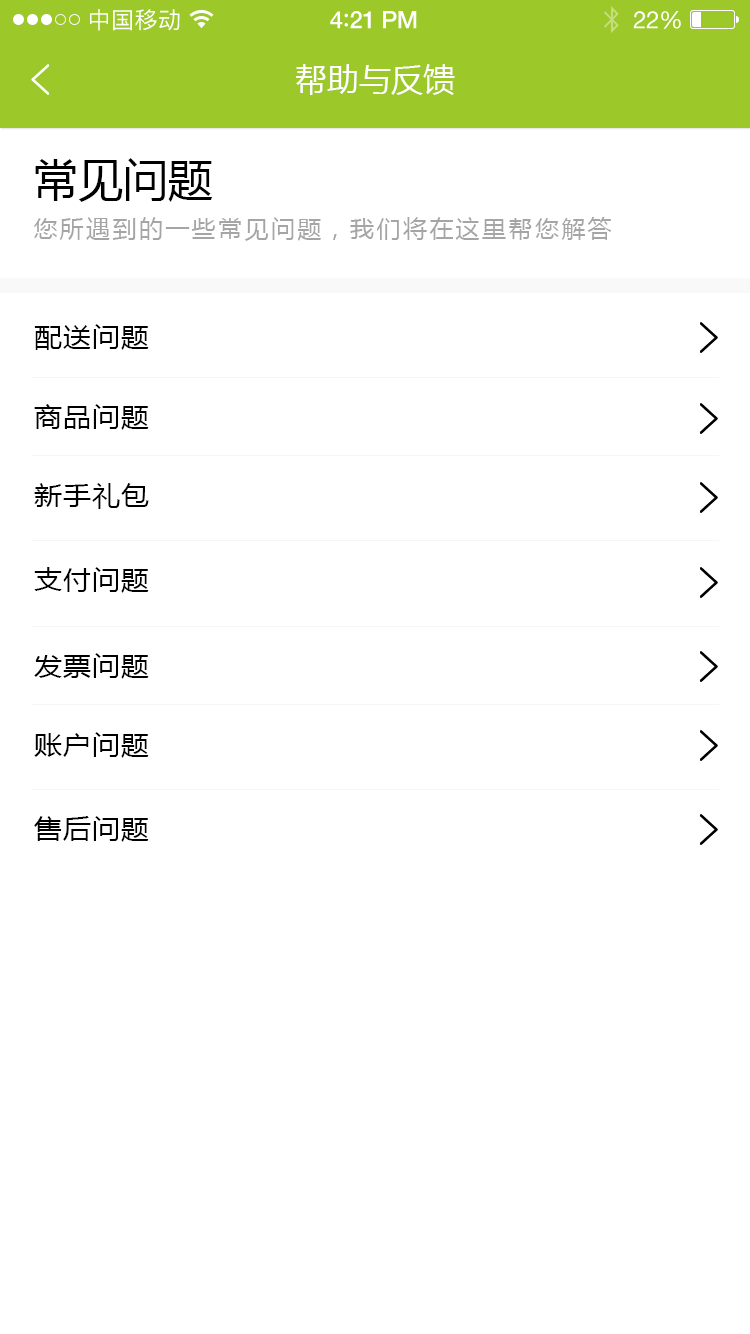
<style>
.page{position:relative;width:750px;height:1334px;background:#ffffff}
.page>*{position:absolute;margin:0}
.t1{font:23px "PingFangSC-Regular";letter-spacing:0.02em;color:#ffffff}
.t2{font:24px "HelveticaNeue-Medium";letter-spacing:-0.02em;color:#ffffff}
.t3{font:26px "Avenir-Medium";letter-spacing:-0.02em;color:#ffffff}
.t4{font:24px "HelveticaNeue";letter-spacing:-0.02em;color:#ffffff}
.t5{font:32px "MicrosoftYaHei";color:#ffffff;text-transform:uppercase}
.t6{font:45px "MicrosoftYaHei";color:#000000;text-transform:uppercase}
.t7{font:24px "MicrosoftYaHei";letter-spacing:0.1em;color:#a5a5a5;text-transform:uppercase}
.t8{font:26px "MicrosoftYaHei";letter-spacing:0.05em;color:#000000;scale:1.06 1}
</style>
<div class="page">
<p class="t1" style="left:90px;top:9px;width:90px;height:22px">中国移动</p>
<p class="t2" style="left:330px;top:11px;width:87px;height:18px">4<span class="t3">:</span>21 PM</p>
<p class="t4" style="left:633px;top:11px;width:48px;height:18px">22%</p>
<p class="t5" style="left:296px;top:64px;width:159px;height:31px">帮助与反馈</p>
<p class="t6" style="left:35px;top:158px;width:178px;height:44px">常见问题</p>
<p class="t7" style="left:33px;top:217px;width:579px;height:24px">您所遇到的一些常见问题，我们将在这里帮您解答</p>
<p class="t8" style="left:34px;top:324px;width:115px;height:26px">配送问题</p>
<p class="t8" style="left:34px;top:404px;width:115px;height:26px">商品问题</p>
<p class="t8" style="left:34px;top:483px;width:115px;height:26px">新手礼包</p>
<p class="t8" style="left:34px;top:567px;width:115px;height:26px">支付问题</p>
<p class="t8" style="left:34px;top:653px;width:115px;height:26px">发票问题</p>
<p class="t8" style="left:34px;top:732px;width:115px;height:26px">账户问题</p>
<p class="t8" style="left:34px;top:816px;width:115px;height:26px">售后问题</p>
</div>
